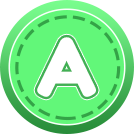
<style>
.page{position:relative;width:134px;height:134px;background:#62f779}
.page>*{position:absolute;margin:0}
.t1{font:80px "FredokaOne-Regular";color:#ffffff}
</style>
<div class="page">
<p class="t1" style="left:37px;top:37px;width:59px;height:60px">A</p>
</div>
